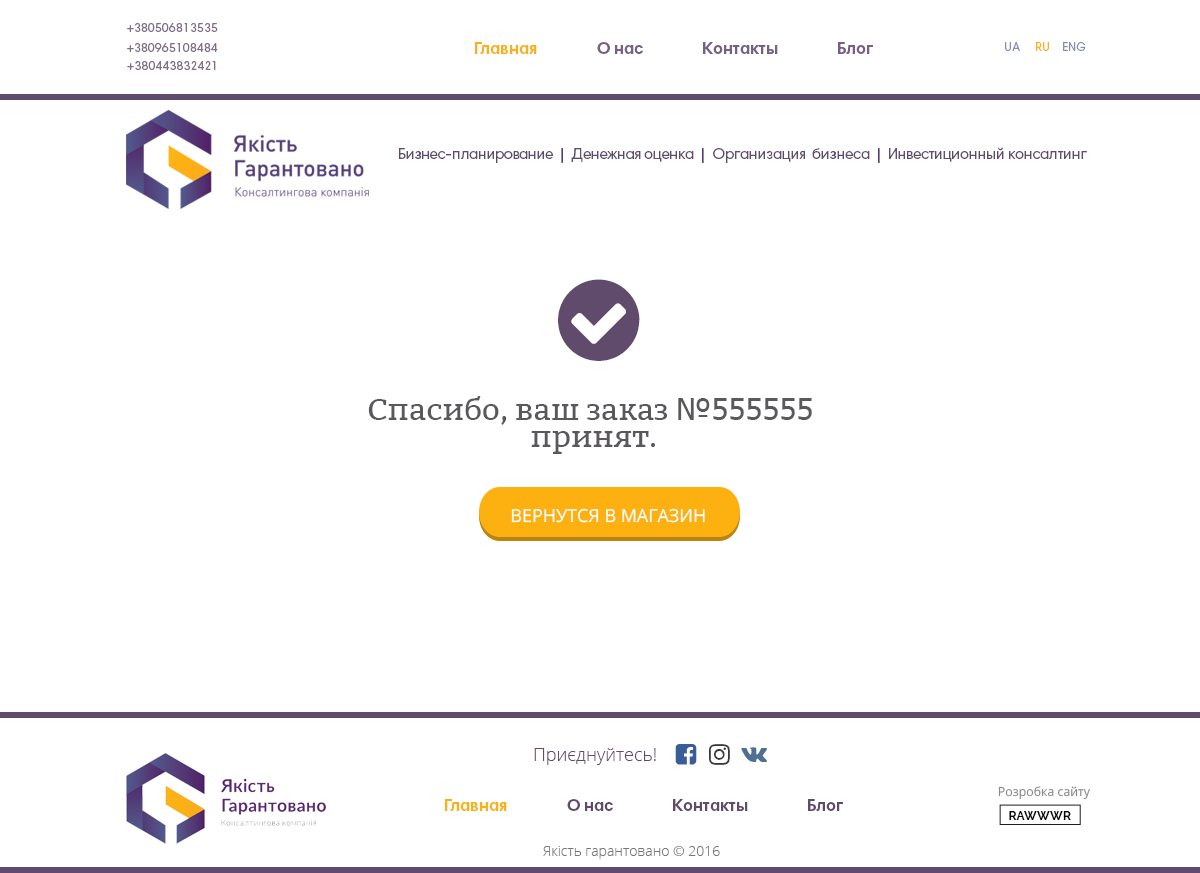
<style>
.page{position:relative;width:1200px;height:873px;background:#ffffff}
.page>*{position:absolute;margin:0}
.t1{font:12px "HarmoniaSansProCyr-Regular";color:#806f89}
.t2{font:17px "HarmoniaSansProCyr-Bold";color:#fdaf19}
.t3{font:17px "HarmoniaSansProCyr-Bold";color:#604b6c}
.t4{font:12px "HarmoniaSansProCyr-Regular";color:#858eb3}
.t5{font:12px "HarmoniaSansProCyr-Regular";color:#fdaf19}
.t6{font:15.3px "HarmoniaSansProCyr-Regular";letter-spacing:-0.025em;color:#604b6c}
.t7{font:15.3px "HarmoniaSansProCyr-Bold";color:#533774}
.t8{font:15.3px "HarmoniaSansProCyr-Regular";letter-spacing:-0.017em;color:#604a6e}
.t9{font:30px/26.6px "Bitter-Regular";color:#5a585c;scale:1.04 1}
.t10{font:30px/26.6px "Tahoma";color:#5a585c;scale:1.04 1}
.t11{font:18px "OpenSans";color:#ffffff;text-transform:uppercase}
.t12{font:18px "OpenSans-Light";color:#604b6c}
.t13{font:12.4px "OpenSans";color:#8a8a8b}
.t14{font:17px "HarmoniaSansProCyr-Bold";color:#fdb111}
.t15{font:12.4px "Raleway-Bold";color:#07080c}
.t16{font:14px "OpenSans-Light";color:#787878}
</style>
<div class="page">
<p class="t1" style="left:127px;top:23px;width:91px;height:9px">+380506813535</p>
<p class="t1" style="left:127px;top:43px;width:91px;height:9px">+380965108484</p>
<p class="t2" style="left:475px;top:42px;width:62px;height:12px">Главная</p>
<p class="t3" style="left:597px;top:42px;width:46px;height:12px">О нас</p>
<p class="t3" style="left:703px;top:42px;width:75px;height:12px">Контакты</p>
<p class="t3" style="left:838px;top:42px;width:35px;height:12px">Блог</p>
<p class="t4" style="left:1005px;top:42px;width:44px;height:9px">UA    <span class="t5"> RU</span></p>
<p class="t4" style="left:1063px;top:42px;width:23px;height:9px">ENG</p>
<p class="t1" style="left:127px;top:61px;width:89px;height:9px">+380443832421</p>
<p class="t6" style="left:399px;top:148px;width:154px;height:15px">Бизнес-планирование</p>
<p class="t7" style="left:561px;top:148px;width:2px;height:15px">|</p>
<p class="t8" style="left:571px;top:148px;width:123px;height:14px">Денежная оценка</p>
<p class="t7" style="left:702px;top:148px;width:2px;height:15px">|</p>
<p class="t8" style="left:713px;top:148px;width:157px;height:15px">Организация  бизнеса</p>
<p class="t7" style="left:878px;top:148px;width:2px;height:15px">|</p>
<p class="t8" style="left:889px;top:147px;width:198px;height:15px">Инвестиционный консалтинг</p>
<p class="t9" style="left:368px;top:396px;width:444px;height:58px;text-align:center">Спасибо, ваш заказ <span class="t10">№555555<br></span> принят.</p>
<p class="t11" style="left:511px;top:508px;width:194px;height:15px">Вернутся в магазин</p>
<p class="t12" style="left:534px;top:748px;width:122px;height:17px">Приєднуйтесь!</p>
<p class="t13" style="left:998px;top:786px;width:92px;height:14px">Розробка сайту</p>
<p class="t14" style="left:445px;top:799px;width:62px;height:12px">Главная</p>
<p class="t3" style="left:567px;top:799px;width:46px;height:12px">О нас</p>
<p class="t3" style="left:673px;top:799px;width:75px;height:12px">Контакты</p>
<p class="t3" style="left:808px;top:799px;width:35px;height:12px">Блог</p>
<p class="t15" style="left:1009px;top:811px;width:62px;height:9px">RAWWWR</p>
<p class="t16" style="left:543px;top:846px;width:177px;height:13px">Якість гарантовано © 2016</p>
</div>
